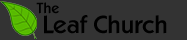
<style>
.page{position:relative;width:187px;height:40px;background:#333333}
.page>*{position:absolute;margin:0}
.t1{font:14px "Koblenz-Serial-Medium-Regular";color:#000000}
.t2{font:24px "Koblenz-Serial-Medium-Regular";color:#000000}
</style>
<div class="page">
<p class="t1" style="left:36px;top:2px;width:23px;height:12px">The</p>
<p class="t2" style="left:44px;top:15px;width:123px;height:19px">Leaf Church</p>
</div>
